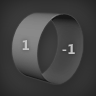
<style>
.page{position:relative;width:96px;height:96px}
.page>*{position:absolute;margin:0}
.t1{font:14px "LaoUI-Bold";color:#c2c2c2}
</style>
<div class="page">
<p class="t1" style="left:22px;top:40px;width:7px;height:10px">1</p>
<p class="t1" style="left:62px;top:44px;width:13px;height:10px">-1</p>
</div>
